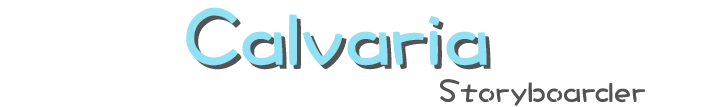
<style>
.page{position:relative;width:715px;height:107px;background:#ffffff}
.page>*{position:absolute;margin:0}
.t1{font:80px "DFCraftYu-W7-WING-RKSJ-H";color:#90e1f4}
.t2{font:80px "DFCraftYu-W7-WING-RKSJ-H"}
.t3{font:32px "DFCraftYu-W7-WING-RKSJ-H";color:#535353}
</style>
<div class="page">
<p class="t1" style="left:186px;top:7px;width:301px;height:59px">Calvaria</p>
<p class="t2" style="left:190px;top:11px;width:301px;height:59px">Calvaria</p>
<p class="t3" style="left:440px;top:79px;width:205px;height:27px">Storyboarder</p>
</div>
